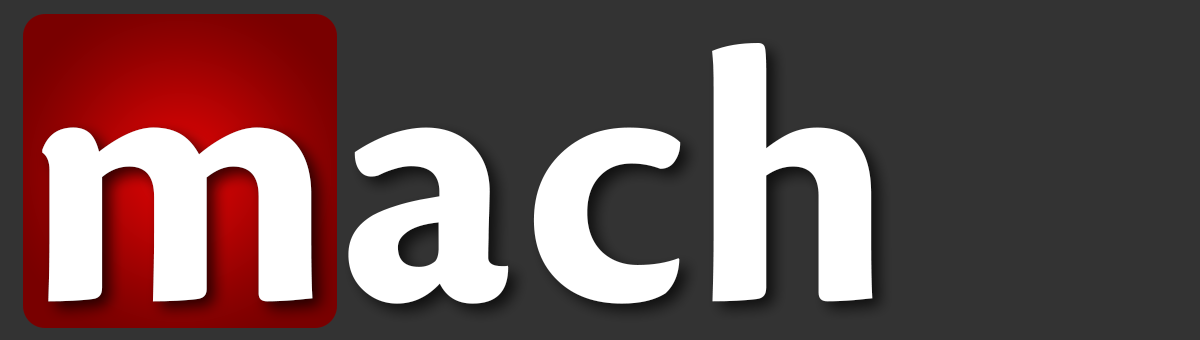
<style>
.page{position:relative;width:1200px;height:340px;background:#333333}
.page>*{position:absolute;margin:0}
.t1{font:377.5px "CronosPro-Bold";letter-spacing:0.018em;color:#ffffff}
</style>
<div class="page">
<p class="t1" style="left:42px;top:43px;width:831px;height:261px">mach</p>
</div>
